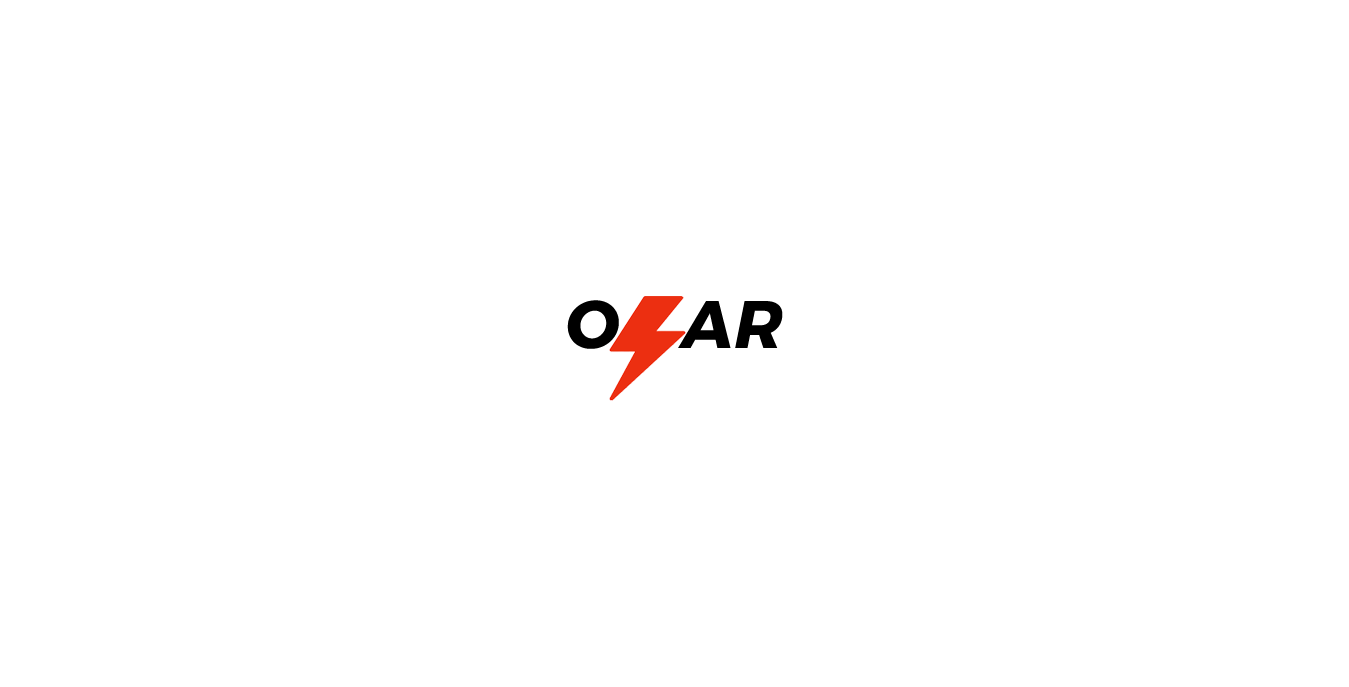
<style>
.page{position:relative;width:1349px;height:687px;background:#ffffff}
.page>*{position:absolute;margin:0}
.t1{font:67px "Montserrat-BoldItalic";letter-spacing:0.009em;color:#000000}
</style>
<div class="page">
<p class="t1" style="left:567px;top:300px;width:216px;height:49px">O    AR</p>
</div>
